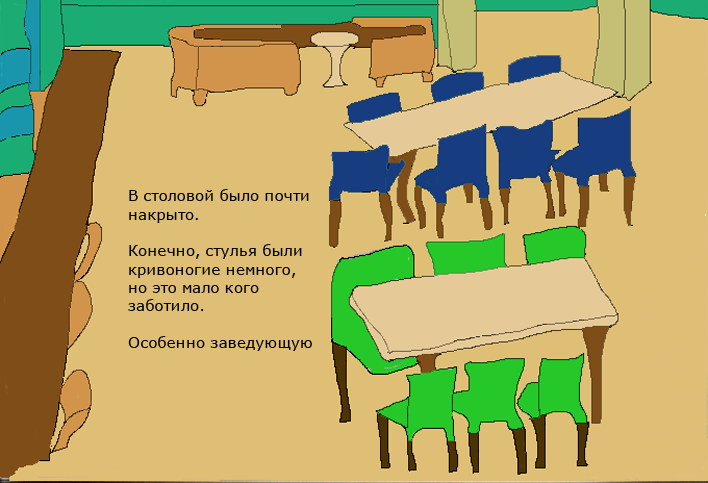
<style>
.page{position:relative;width:708px;height:483px;background:#dfbe76}
.page>*{position:absolute;margin:0}
.t1{font:15.3px "MSReferenceSansSerif";color:#000000}
</style>
<div class="page">
<p class="t1" style="left:128px;top:189px;width:184px;height:162px">В столовой было почти<br>накрыто.<br><br>Конечно, стулья были <br>кривоногие немного, <br>но это мало кого <br>заботило.<br><br>Особенно заведующую</p>
</div>
